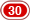
<style>
.page{position:relative;width:30px;height:20px;background:#ffffff}
.page>*{position:absolute;margin:0}
.t1{font:12px "Helvetica-Bold";color:#ffffff}
</style>
<div class="page">
<p class="t1" style="left:8px;top:6px;width:14px;height:9px">30</p>
</div>
